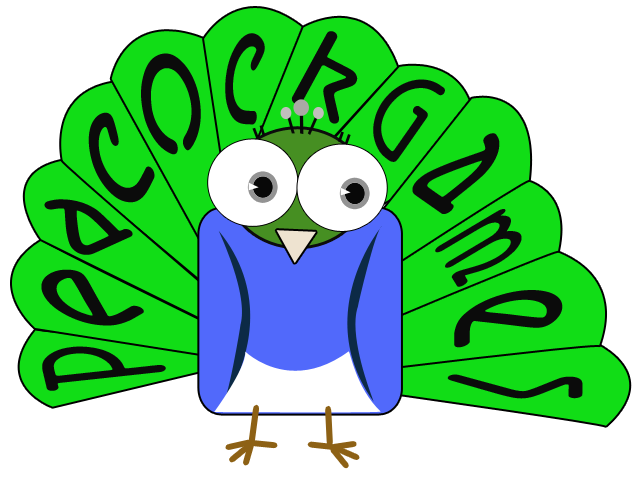
<style>
.page{position:relative;width:640px;height:480px;background:#ffffff}
.page>*{position:absolute;margin:0}
.t1{font:191.9px "Aerolite";color:#0b0b0b;scale:0.5 1}
.t2{font:117.5px "Aerolite";color:#0b0b0b;scale:1.18 1}
.t3{font:209.4px "Aerolite";color:#0b0b0b;scale:0.55 1}
.t4{font:130px "Aerolite";color:#0b0b0b;scale:0.81 1}
.t5{font:186.1px "Aerolite";color:#0b0b0b;scale:0.78 1}
.t6{font:209.2px "Aerolite";color:#0b0b0b;scale:0.52 1}
.t7{font:148.6px "Aerolite";color:#0b0b0b;scale:0.91 1}
.t8{font:171.1px "Aerolite";color:#0b0b0b;scale:0.41 1}
.t9{font:195.2px "Aerolite";color:#0b0b0b;scale:0.69 1}
.t10{font:234.3px "Aerolite";color:#0b0b0b;scale:0.48 1}
.t11{font:173.3px "Aerolite";color:#0b0b0b;scale:0.55 1}
.t12{font:192.2px "Aerolite";color:#0b0b0b;scale:0.45 1}
</style>
<div class="page">
<p class="t1" style="left:225px;top:33px;width:40px;height:92px;rotate:2deg">c</p>
<p class="t2" style="left:291px;top:31px;width:67px;height:93px;rotate:27deg">k</p>
<p class="t3" style="left:141px;top:53px;width:60px;height:102px;rotate:-17deg">o</p>
<p class="t4" style="left:373px;top:79px;width:72px;height:83px;rotate:35deg">G</p>
<p class="t5" style="left:88px;top:112px;width:67px;height:91px;rotate:-63deg">c</p>
<p class="t6" style="left:412px;top:133px;width:88px;height:81px;rotate:35deg">a</p>
<p class="t7" style="left:44px;top:199px;width:89px;height:56px;rotate:-24deg">a</p>
<p class="t8" style="left:435px;top:209px;width:87px;height:78px;rotate:58deg">m</p>
<p class="t9" style="left:41px;top:269px;width:103px;height:57px;rotate:-30deg">e</p>
<p class="t10" style="left:454px;top:290px;width:109px;height:58px;rotate:89deg">e</p>
<p class="t11" style="left:42px;top:346px;width:124px;height:45px;rotate:-103deg">P</p>
<p class="t12" style="left:447px;top:374px;width:136px;height:25px;rotate:92deg">s</p>
</div>
